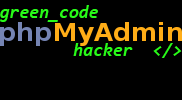
<style>
.page{position:relative;width:182px;height:100px;background:#000000}
.page>*{position:absolute;margin:0}
.t1{font:18px "Consolas-BoldItalic";color:#28fb18}
</style>
<div class="page">
<p class="t1" style="left:0px;top:5px;width:98px;height:17px">green_code</p>
<p class="t1" style="left:73px;top:43px;width:109px;height:15px">hacker  &lt;/&gt;</p>
</div>
